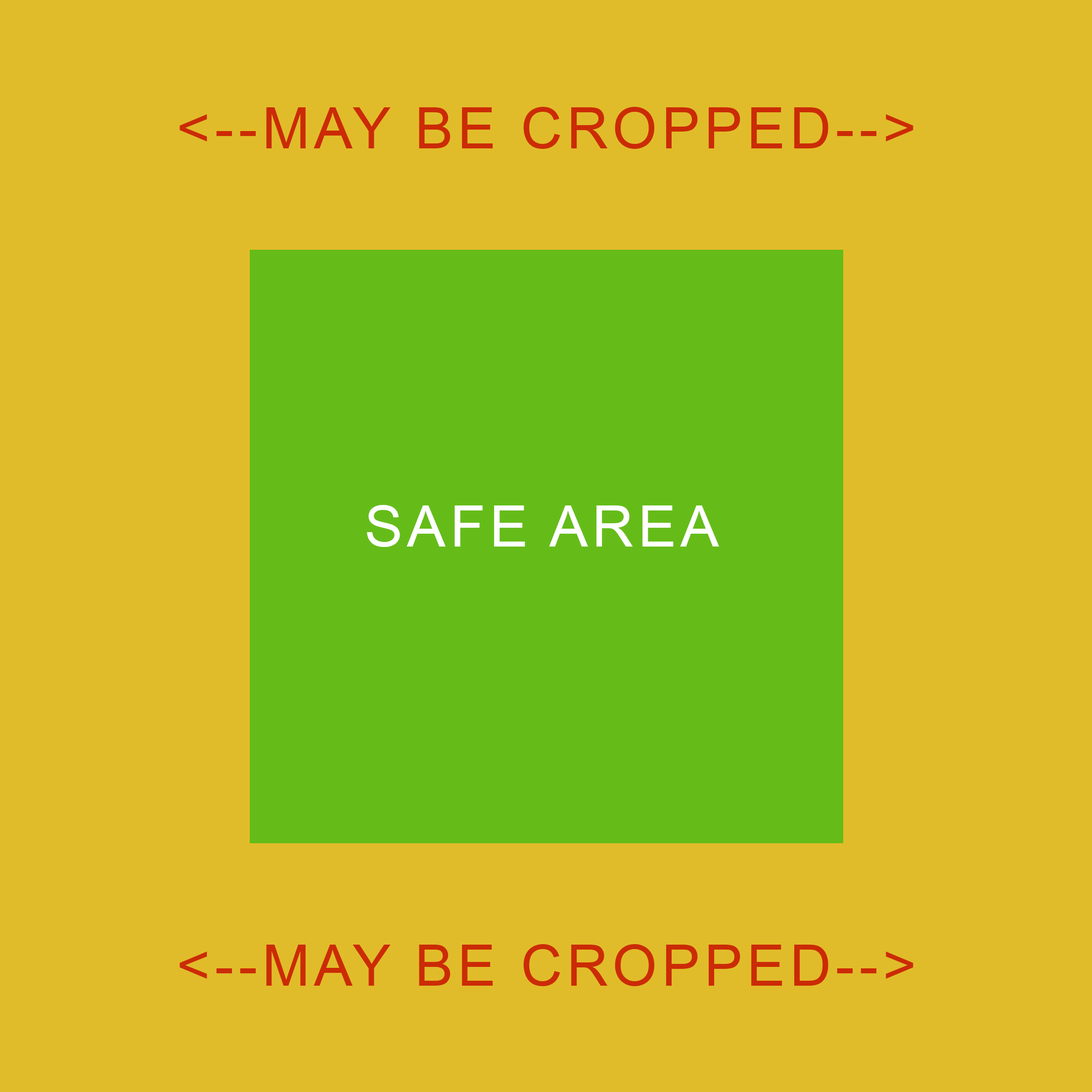
<style>
.page{position:relative;width:1092px;height:1092px;background:#e1bc2a}
.page>*{position:absolute;margin:0}
.t1{font:57.2px "ArialMT";letter-spacing:0.08em;color:#cb2b06}
.t2{font:57.2px "ArialMT";letter-spacing:0.08em;color:#ffffff}
</style>
<div class="page">
<p class="t1" style="left:180px;top:107px;width:733px;height:42px">&lt;--MAY BE CROPPED--&gt;</p>
<p class="t2" style="left:367px;top:505px;width:352px;height:42px">SAFE AREA</p>
<p class="t1" style="left:180px;top:944px;width:733px;height:42px">&lt;--MAY BE CROPPED--&gt;</p>
</div>
